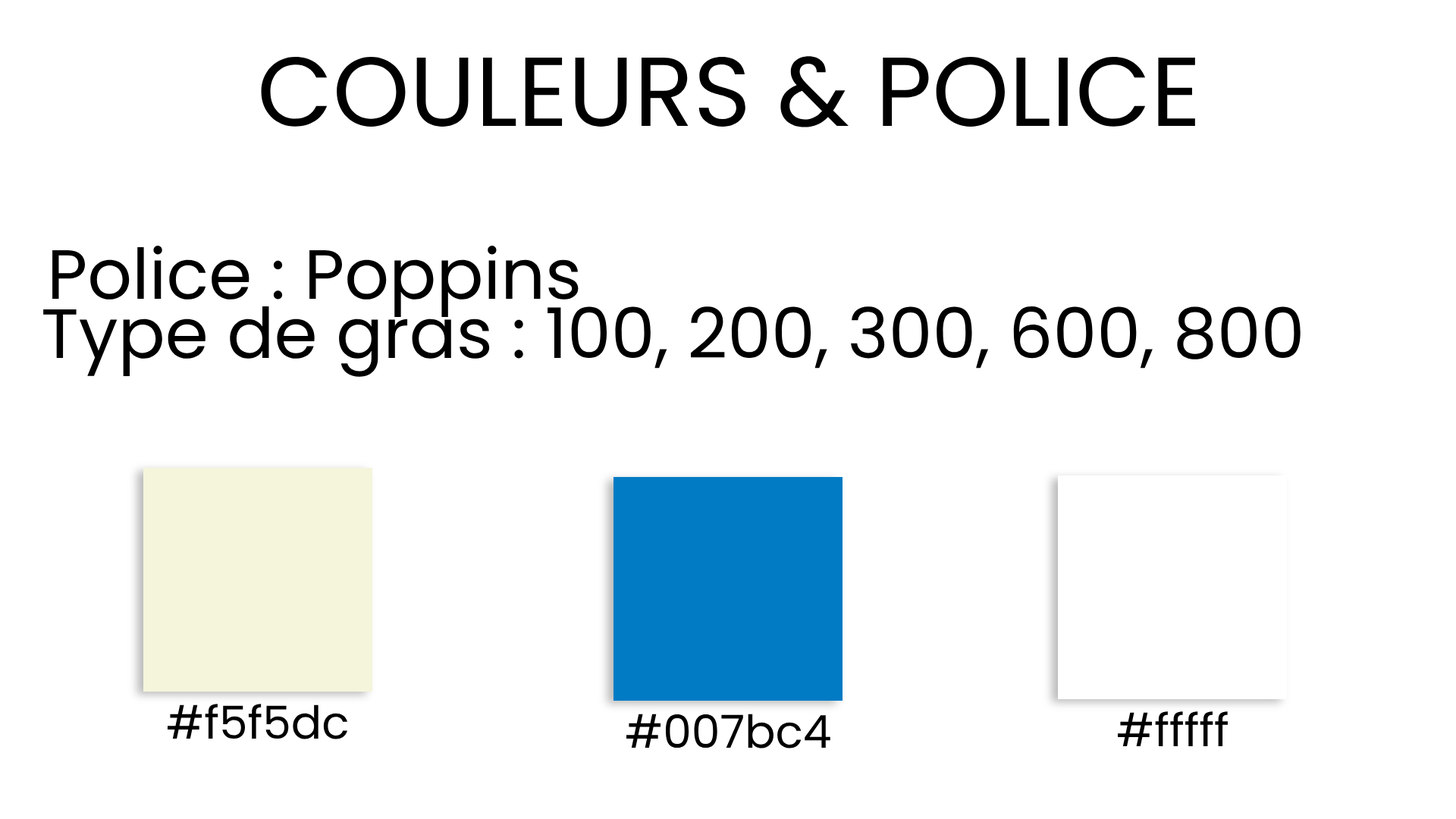
<style>
.page{position:relative;width:1456px;height:819px;background:#ffffff}
.page>*{position:absolute;margin:0}
.t1{font:97.8px "Poppins-Regular";color:#000000}
.t2{font:69.8px "Poppins-Regular";color:#000000}
.t3{font:45.4px "Poppins-Regular";color:#000000}
</style>
<div class="page">
<p class="t1" style="left:261px;top:56px;width:934px;height:71px">COULEURS &amp; POLICE</p>
<p class="t2" style="left:52px;top:245px;width:527px;height:72px">Police : Poppins</p>
<p class="t2" style="left:43px;top:306px;width:1258px;height:71px">Type de gras : 100, 200, 300, 600, 800</p>
<p class="t3" style="left:168px;top:704px;width:179px;height:35px">#f5f5dc</p>
<p class="t3" style="left:626px;top:714px;width:204px;height:34px">#007bc4</p>
<p class="t3" style="left:1118px;top:711px;width:110px;height:35px">#fffff</p>
</div>
